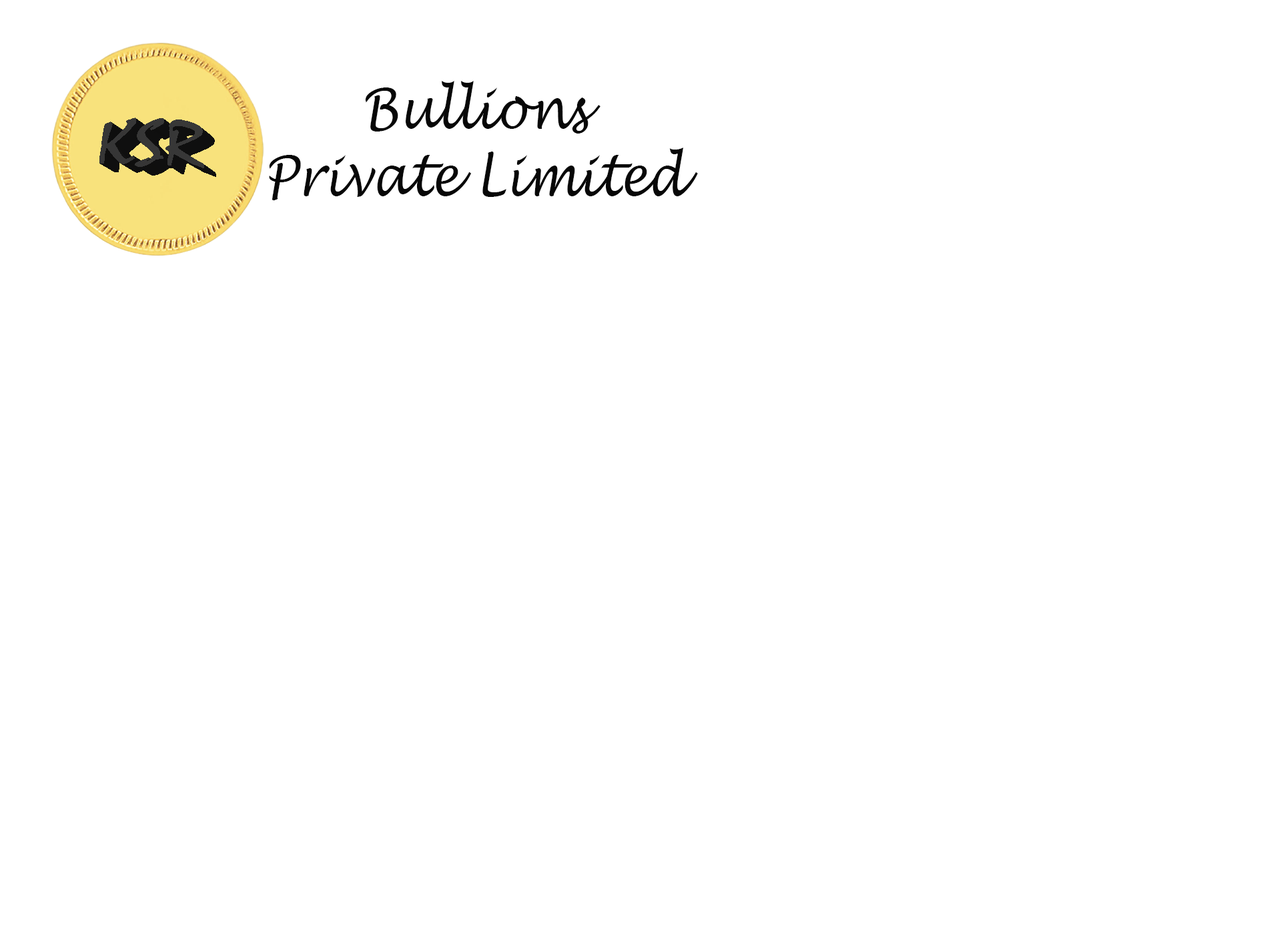
<style>
.page{position:relative;width:1261px;height:946px;background:#ffffff}
.page>*{position:absolute;margin:0}
.t1{font:55.9px "LucidaHandwriting-Italic";color:#070707;scale:0.86 1}
</style>
<div class="page">
<p class="t1" style="left:269px;top:81px;width:429px;height:119px;text-align:center">Bullions<br>Private Limited</p>
</div>
